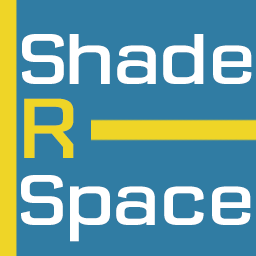
<style>
.page{position:relative;width:256px;height:256px;background:#307ca3}
.page>*{position:absolute;margin:0}
.t1{font:73.1px "CPMono_v07Plain";letter-spacing:-0.1em;color:#ffffff;scale:1.18 1}
.t2{font:86.7px "CPMono_v07Plain";letter-spacing:-0.1em;color:#efd527;scale:1.18 1}
</style>
<div class="page">
<p class="t1" style="left:22px;top:34px;width:230px;height:50px">Shade</p>
<p class="t2" style="left:24px;top:98px;width:50px;height:60px">R</p>
<p class="t1" style="left:21px;top:175px;width:230px;height:67px">Space</p>
</div>
